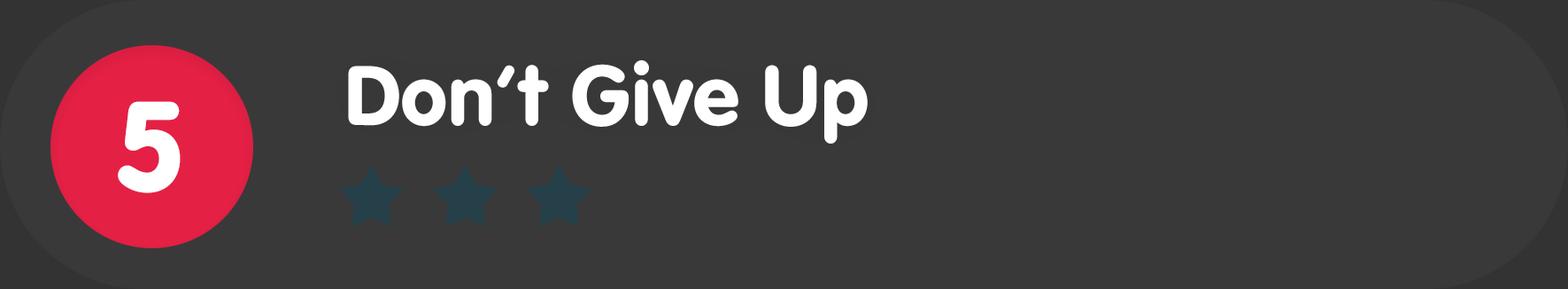
<style>
.page{position:relative;width:1568px;height:289px;background:#393939}
.page>*{position:absolute;margin:0}
.t1{font:88.5px "VAGRundschriftD";color:#ffffff}
.t2{font:132.8px "VAGRundschriftD";color:#ffffff}
</style>
<div class="page">
<p class="t1" style="left:348px;top:60px;width:520px;height:83px">Don’t Give Up</p>
<p class="t2" style="left:118px;top:101px;width:63px;height:92px">5</p>
</div>
